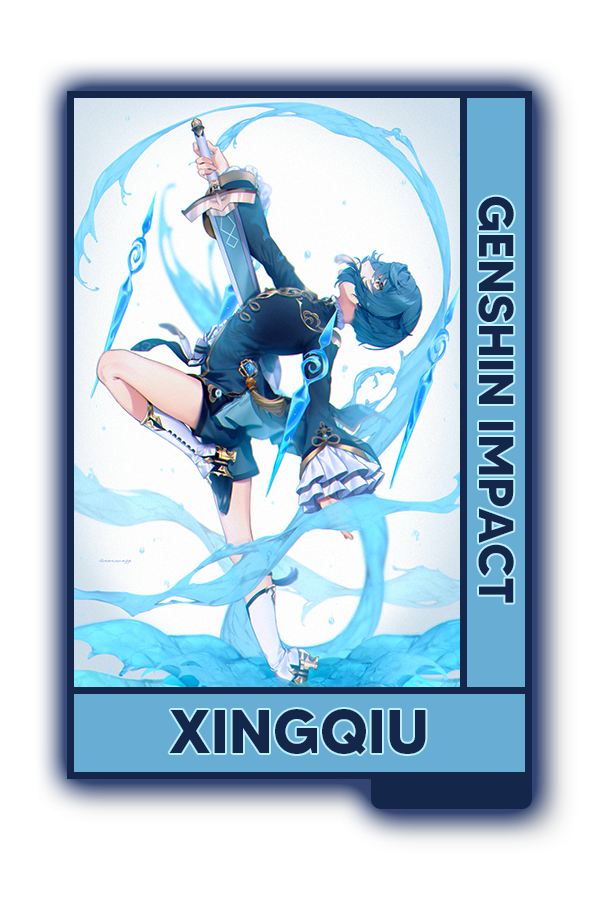
<style>
.page{position:relative;width:600px;height:900px;background:#ffffff}
.page>*{position:absolute;margin:0}
.t1{font:48.8px "MADETOMMY-Bold";color:#1a2133}
.t2{font:61.5px "MADETOMMY-Bold";color:#1a2133}
</style>
<div class="page">
<p class="t1" style="left:478px;top:196px;width:36px;height:407px;rotate:90deg">GENSHIN IMPACT</p>
<p class="t2" style="left:169px;top:709px;width:257px;height:46px">XINGQIU</p>
</div>
